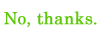
<style>
.page{position:relative;width:100px;height:35px;background:#ffffff}
.page>*{position:absolute;margin:0}
.t1{font:16.7px "CenturySchoolbook";color:#5dc708;font-weight:bold}
</style>
<div class="page">
<p class="t1" style="left:4px;top:11px;width:93px;height:16px">No, thanks.</p>
</div>
